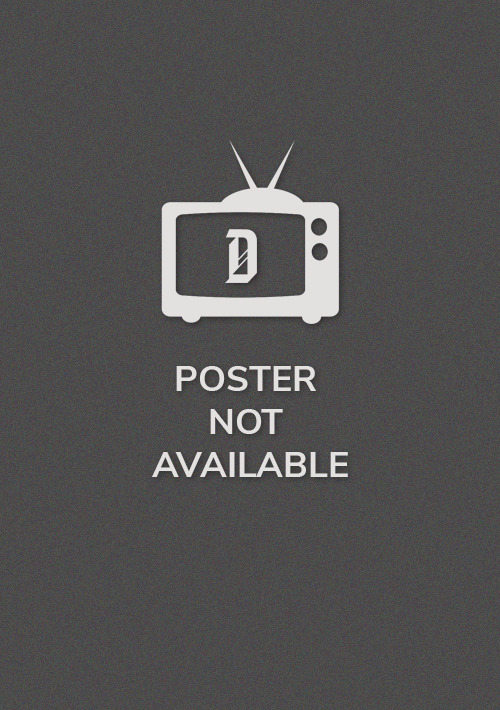
<style>
.page{position:relative;width:500px;height:710px}
.page>*{position:absolute;margin:0}
.t1{font:36px "NunitoSans-Bold";color:#e3e0e0}
</style>
<div class="page">
<p class="t1" style="left:152px;top:366px;width:196px;height:111px;text-align:center">POSTER <br>NOT <br>AVAILABLE</p>
</div>
